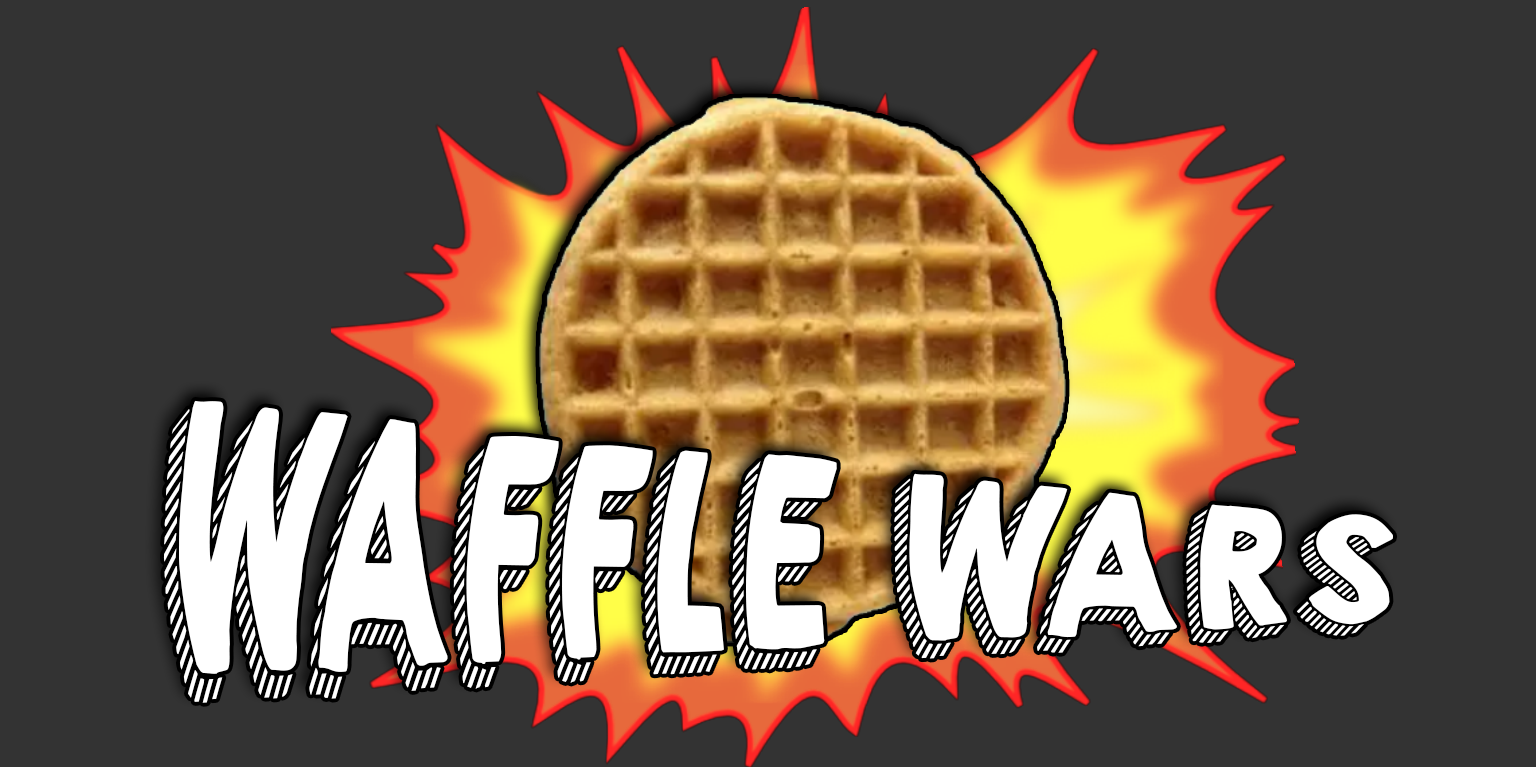
<style>
.page{position:relative;width:1536px;height:767px;background:#333333}
.page>*{position:absolute;margin:0}
.t1{font:102.4px/71.1px "KGHAPPY";color:#ffffff;scale:1.54 1}
</style>
<div class="page">
<p class="t1" style="left:163px;top:400px;width:1230px;height:303px;text-align:center">WAFFLE WARS</p>
</div>
